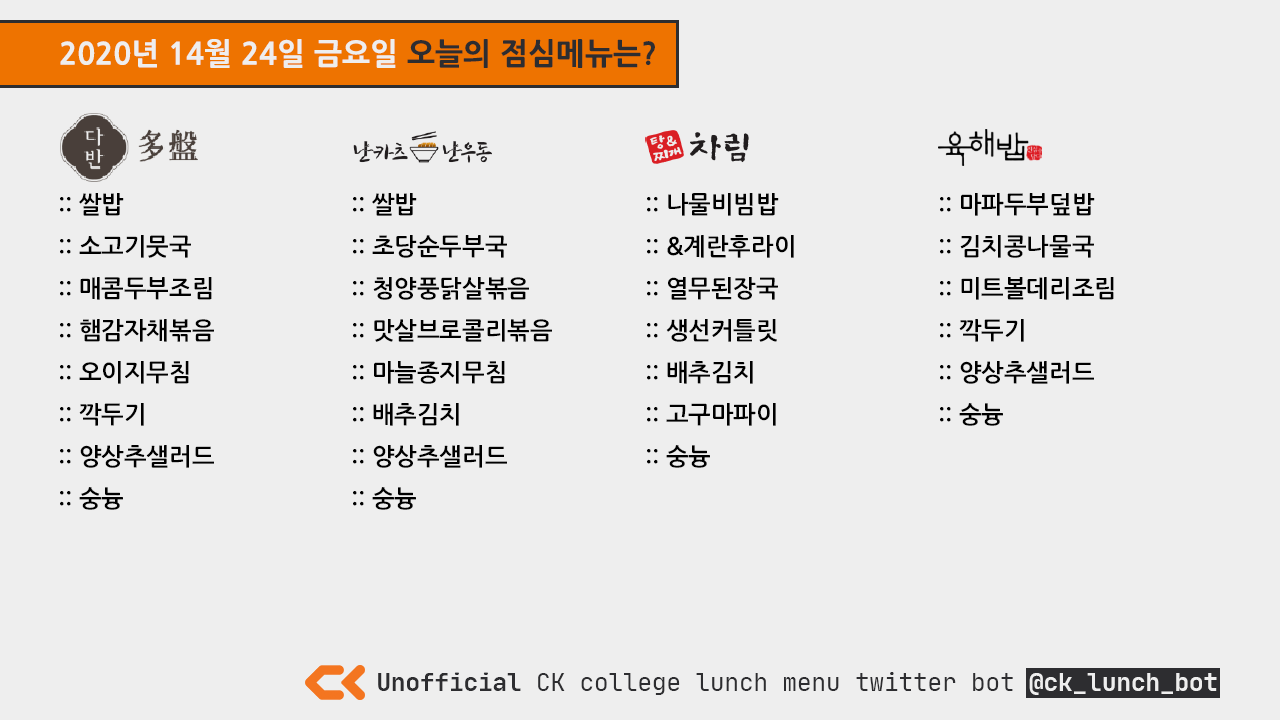
<style>
.page{position:relative;width:1280px;height:720px;background:#eeeeee}
.page>*{position:absolute;margin:0}
.t1{font:30px "NanumGothicOTFExtraBold";color:#eeeeee}
.t2{font:30px "NanumGothicOTFExtraBold";color:#2d2d30}
.t3{font:24px "NanumGothicOTFBold";color:#000000}
.t4{font:24px "JetBrainsMono-Regular";color:#2d2d30}
.t5{font:24px "JetBrainsMono-Bold";color:#2d2d30}
.t6{font:24px "JetBrainsMono-Bold";color:#eeeeee}
</style>
<div class="page">
<p class="t1" style="left:60px;top:39px;width:595px;height:29px">2020년 14월 24일 금요일 <span class="t2">오늘의 점심메뉴는?</span></p>
<p class="t3" style="left:60px;top:193px;width:154px;height:317px">:: 쌀밥<br>:: 소고기뭇국<br>:: 매콤두부조림<br>:: 햄감자채볶음<br>:: 오이지무침<br>:: 깍두기<br>:: 양상추샐러드<br>:: 숭늉</p>
<p class="t3" style="left:353px;top:193px;width:199px;height:317px">:: 쌀밥<br>:: 초당순두부국<br>:: 청양풍닭살볶음<br>:: 맛살브로콜리볶음<br>:: 마늘종지무침<br>:: 배추김치<br>:: 양상추샐러드<br>:: 숭늉</p>
<p class="t3" style="left:647px;top:193px;width:147px;height:275px">:: 나물비빔밥<br>:: &amp;계란후라이<br>:: 열무된장국<br>:: 생선커틀릿<br>:: 배추김치<br>:: 고구마파이<br>:: 숭늉</p>
<p class="t3" style="left:940px;top:193px;width:174px;height:233px">:: 마파두부덮밥<br>:: 김치콩나물국<br>:: 미트볼데리조림<br>:: 깍두기<br>:: 양상추샐러드<br>:: 숭늉</p>
<p class="t4" style="left:378px;top:672px;width:839px;height:23px"><span class="t5">Unofficial </span>CK college lunch menu twitter bot <span class="t6">@ck_lunch_bot</span></p>
</div>
